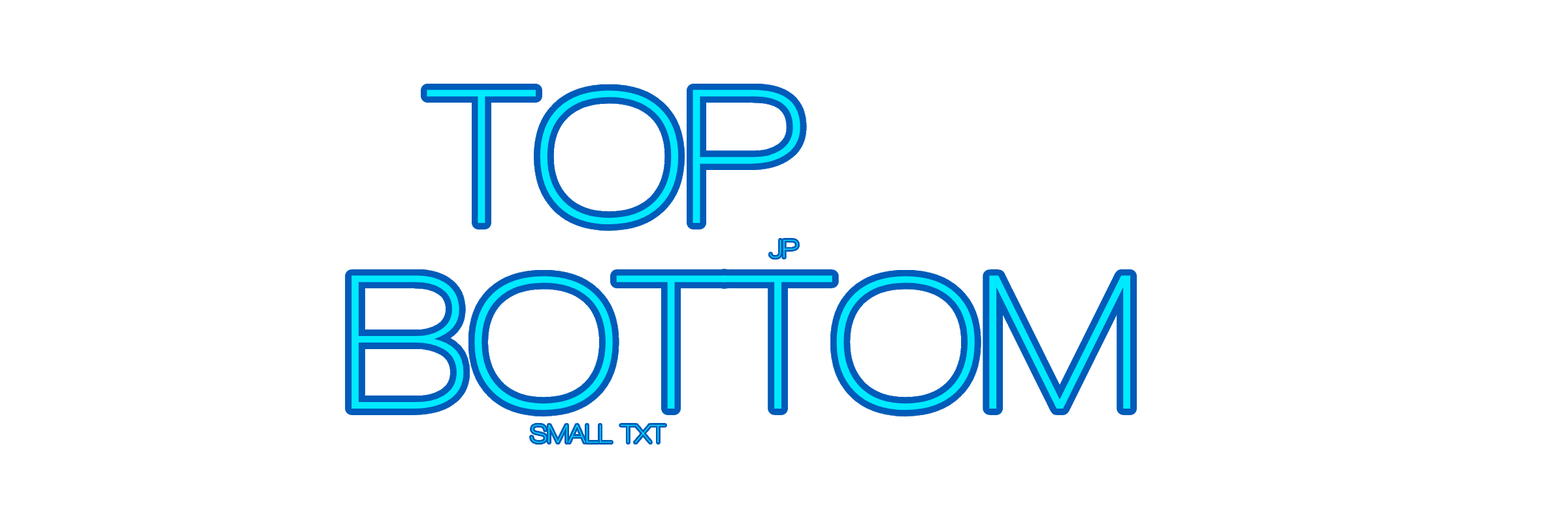
<style>
.page{position:relative;width:1568px;height:523px;background:#ffffff}
.page>*{position:absolute;margin:0}
.t1{font:196px "WalkwaySemiBold";color:#00eaff}
.t2{font:26.1px "WalkwaySemiBold";color:#00eaff}
</style>
<div class="page">
<p class="t1" style="left:427px;top:90px;width:373px;height:135px">TOP</p>
<p class="t2" style="left:770px;top:239px;width:28px;height:19px">JP</p>
<p class="t1" style="left:351px;top:275px;width:779px;height:135px">BOTTOM</p>
<p class="t2" style="left:531px;top:424px;width:135px;height:19px">SMALL TXT</p>
</div>
